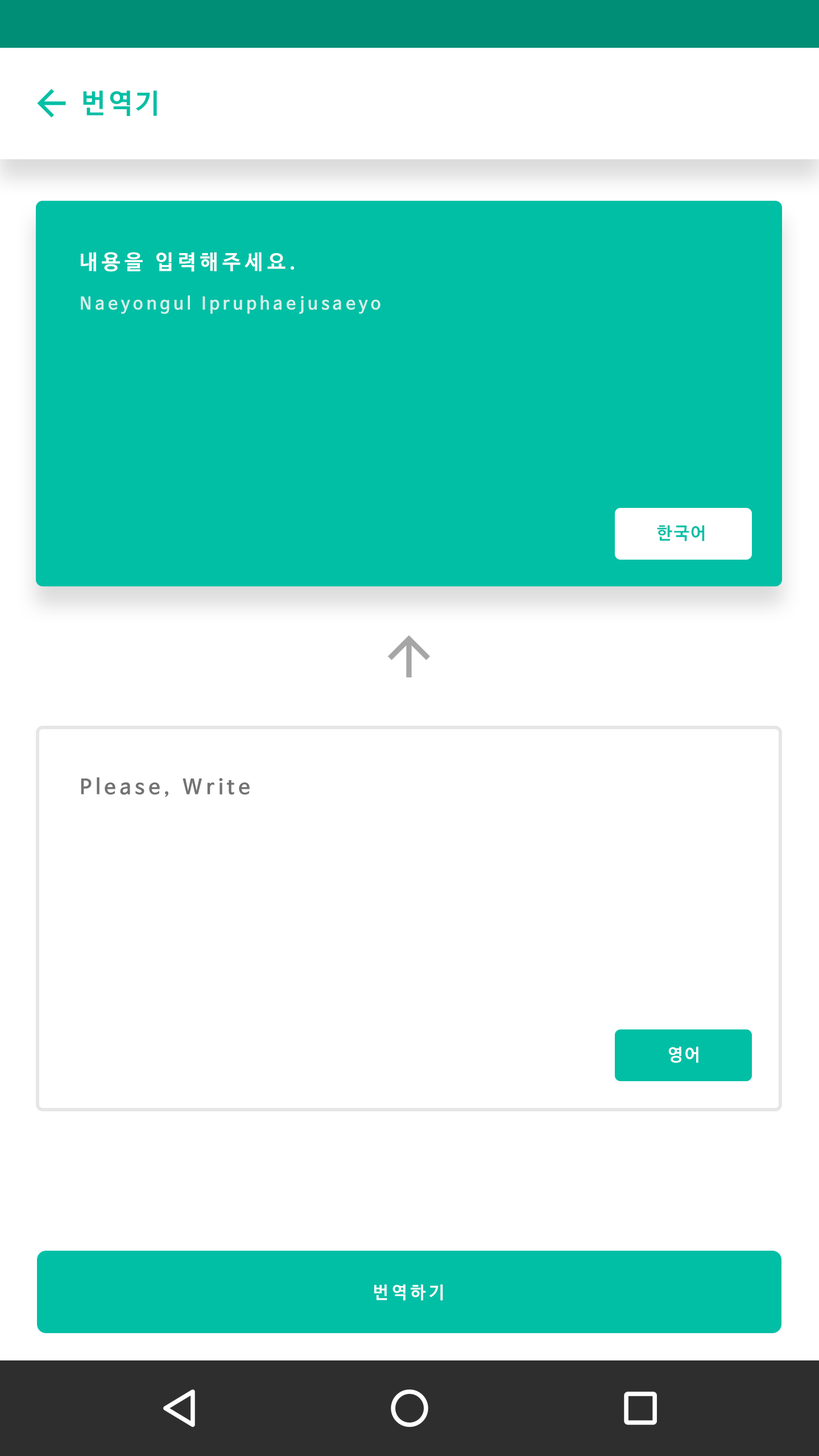
<style>
.page{position:relative;width:819px;height:1456px;background:#ffffff}
.page>*{position:absolute;margin:0}
.t1{font:27.3px "NanumBarunGothicBold";letter-spacing:0.1em;color:#00bfa5}
.t2{font:20.5px "NanumBarunGothicBold";letter-spacing:0.2em;color:#ffffff}
.t3{font:17.1px "NanumBarunGothicBold";letter-spacing:0.2em;color:#d4f0ea}
.t4{font:17.1px "NanumBarunGothicBold";letter-spacing:0.1em;color:#00bfa5}
.t5{font:20.5px "NanumBarunGothicBold";letter-spacing:0.2em;color:#727272}
.t6{font:17.1px "NanumBarunGothicBold";letter-spacing:0.1em;color:#ffffff}
.t7{font:17.1px "NanumBarunGothicBold";letter-spacing:0.2em;color:#ffffff}
</style>
<div class="page">
<p class="t1" style="left:83px;top:90px;width:74px;height:26px">번역기</p>
<p class="t2" style="left:81px;top:252px;width:213px;height:20px">내용을 입력해주세요.</p>
<p class="t3" style="left:81px;top:295px;width:299px;height:19px">Naeyongul Ipruphaejusaeyo</p>
<p class="t4" style="left:657px;top:525px;width:48px;height:16px">한국어</p>
<p class="t5" style="left:81px;top:777px;width:169px;height:20px">Please, Write</p>
<p class="t6" style="left:668px;top:1046px;width:30px;height:17px">영어</p>
<p class="t7" style="left:374px;top:1284px;width:69px;height:17px">번역하기</p>
</div>
